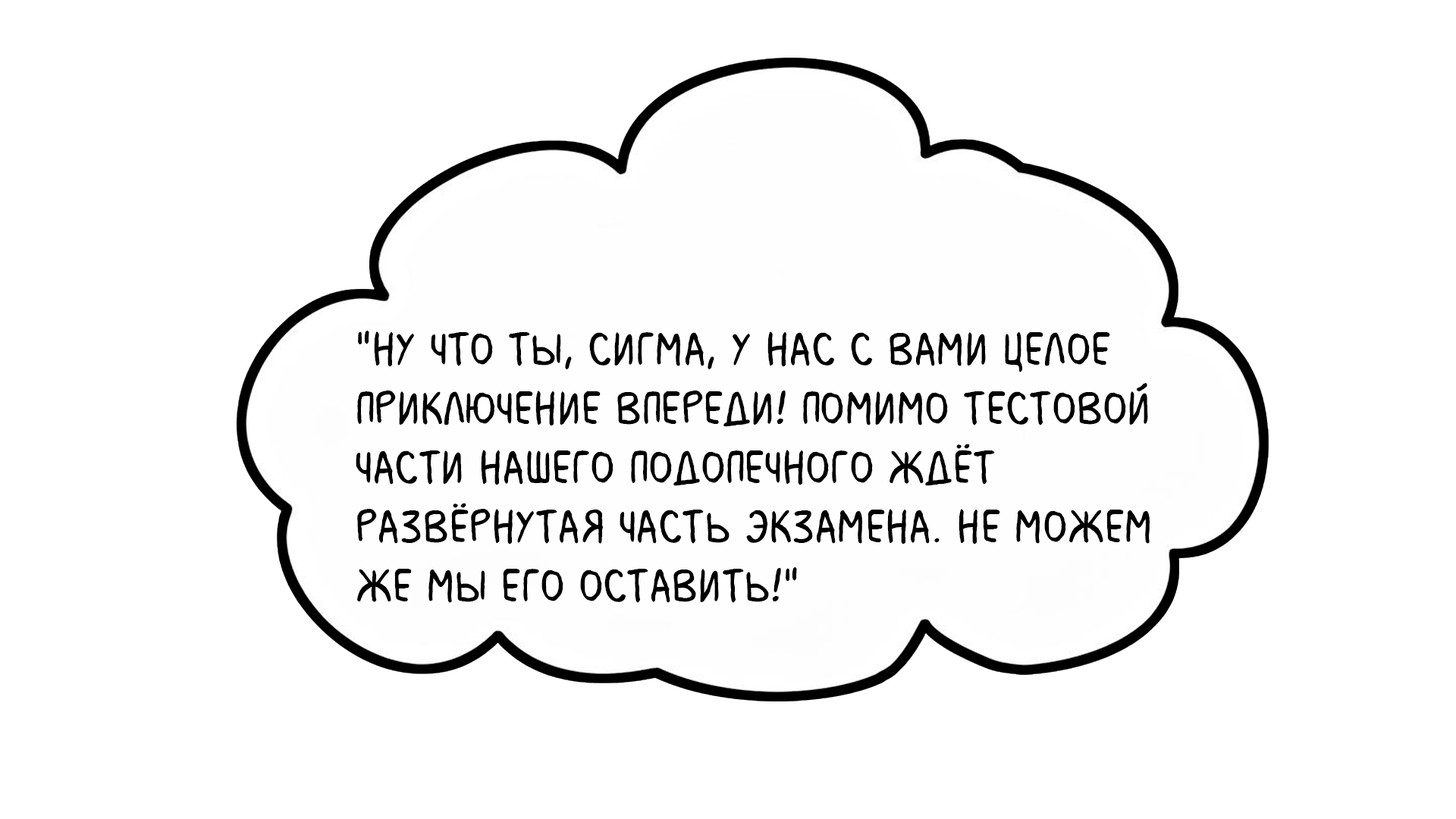
<style>
.page{position:relative;width:1456px;height:819px;background:#ffffff}
.page>*{position:absolute;margin:0}
.t1{font:49.3px "MilkMustacheBB";color:#000000}
</style>
<div class="page">
<p class="t1" style="left:356px;top:331px;width:794px;height:272px">"Ну что ты, Сигма, у нас с вами целое <br>приключение впереди! Помимо тестовой <br>части нашего подопечного ждёт <br>развёрнутая часть экзамена. Не можем <br>же мы его оставить!"</p>
</div>
